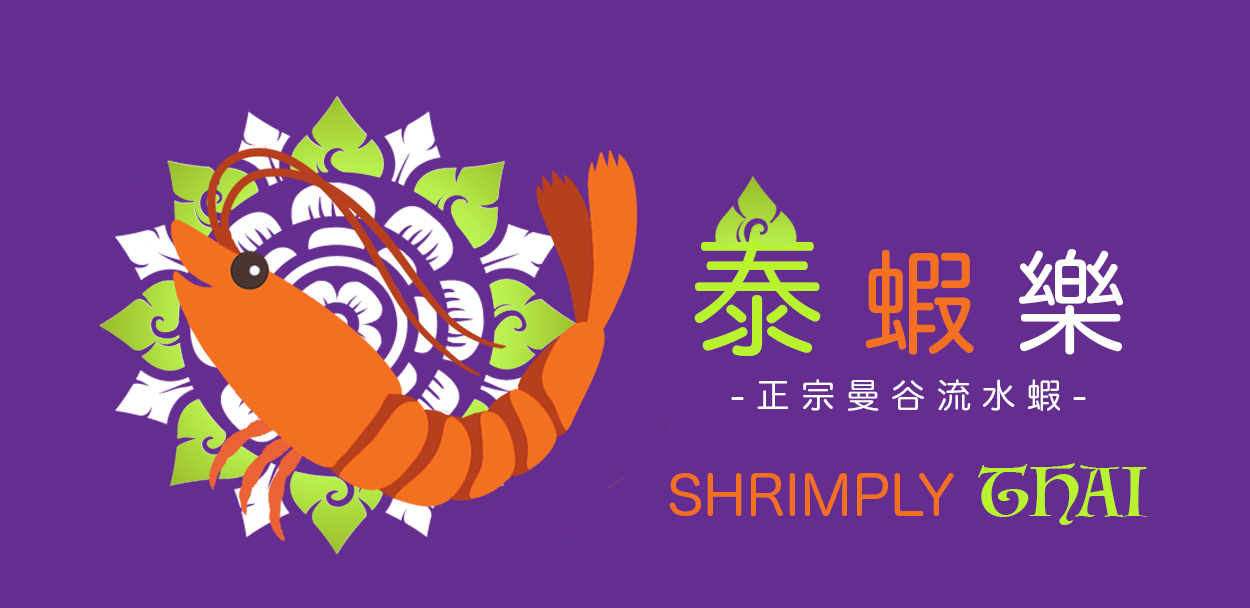
<style>
.page{position:relative;width:1250px;height:608px;background:#662d91}
.page>*{position:absolute;margin:0}
.t1{font:135.6px "HiraMaruProN-W4";color:#b8f32e}
.t2{font:113px "HiraMaruProN-W4";color:#f37021}
.t3{font:113px "HiraMaruProN-W4";color:#ffffff}
.t4{font:33.9px "HiraMaruProN-W4";color:#ffffff}
.t5{font:54.2px "HiraMaruProN-W4";color:#f37021}
.t6{font:67.8px "Luminari-Regular";color:#b8f32e}
</style>
<div class="page">
<p class="t1" style="left:694px;top:230px;width:429px;height:127px">泰 <span class="t2">蝦</span><span class="t3"> 樂</span></p>
<p class="t4" style="left:731px;top:379px;width:355px;height:32px">- 正 宗 曼 谷 流 水 蝦 -</p>
<p class="t5" style="left:669px;top:463px;width:479px;height:62px">SHRIMPLY <span class="t6">THAI</span></p>
</div>
